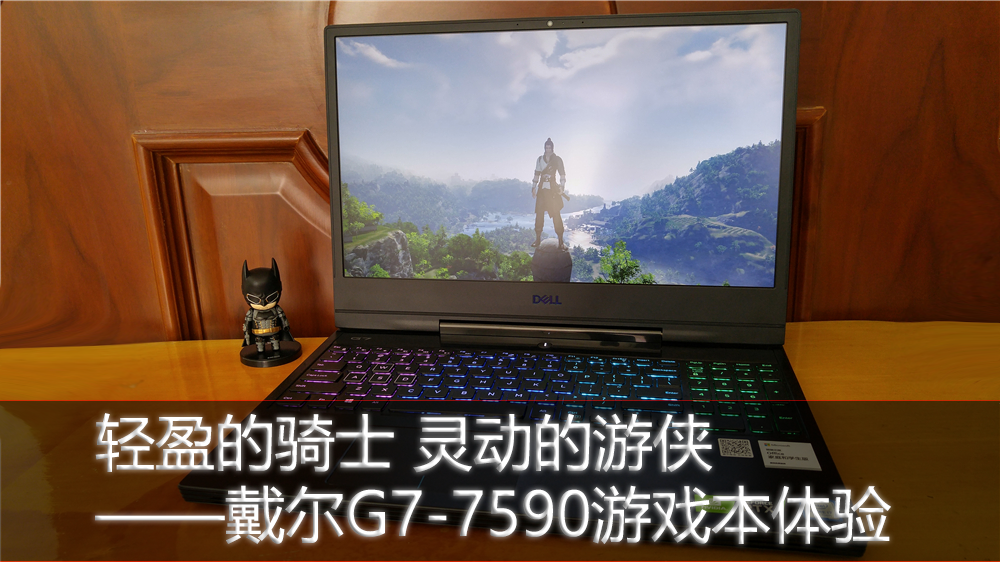
<style>
.page{position:relative;width:1000px;height:562px}
.page>*{position:absolute;margin:0}
.t1{font:60px/72px "MicrosoftYaHeiUI";color:#ffffff}
</style>
<div class="page">
<p class="t1" style="left:95px;top:413px;width:796px;height:131px">轻盈的骑士 灵动的游侠<br>——戴尔G7-7590游戏本体验</p>
</div>
